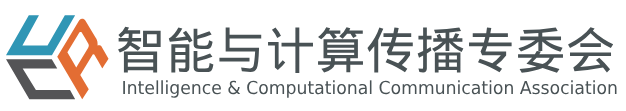
<style>
.page{position:relative;width:626px;height:111px;background:#ffffff}
.page>*{position:absolute;margin:0}
.t1{font:50px "MicrosoftYaHei";color:#495255}
.t2{font:18px "MicrosoftYaHei";color:#495255;scale:0.96 1}
</style>
<div class="page">
<p class="t1" style="left:118px;top:26px;width:496px;height:47px">智能与计算传播专委会</p>
<p class="t2" style="left:123px;top:80px;width:494px;height:18px">Intelligence &amp; Computational Communication Association</p>
</div>
